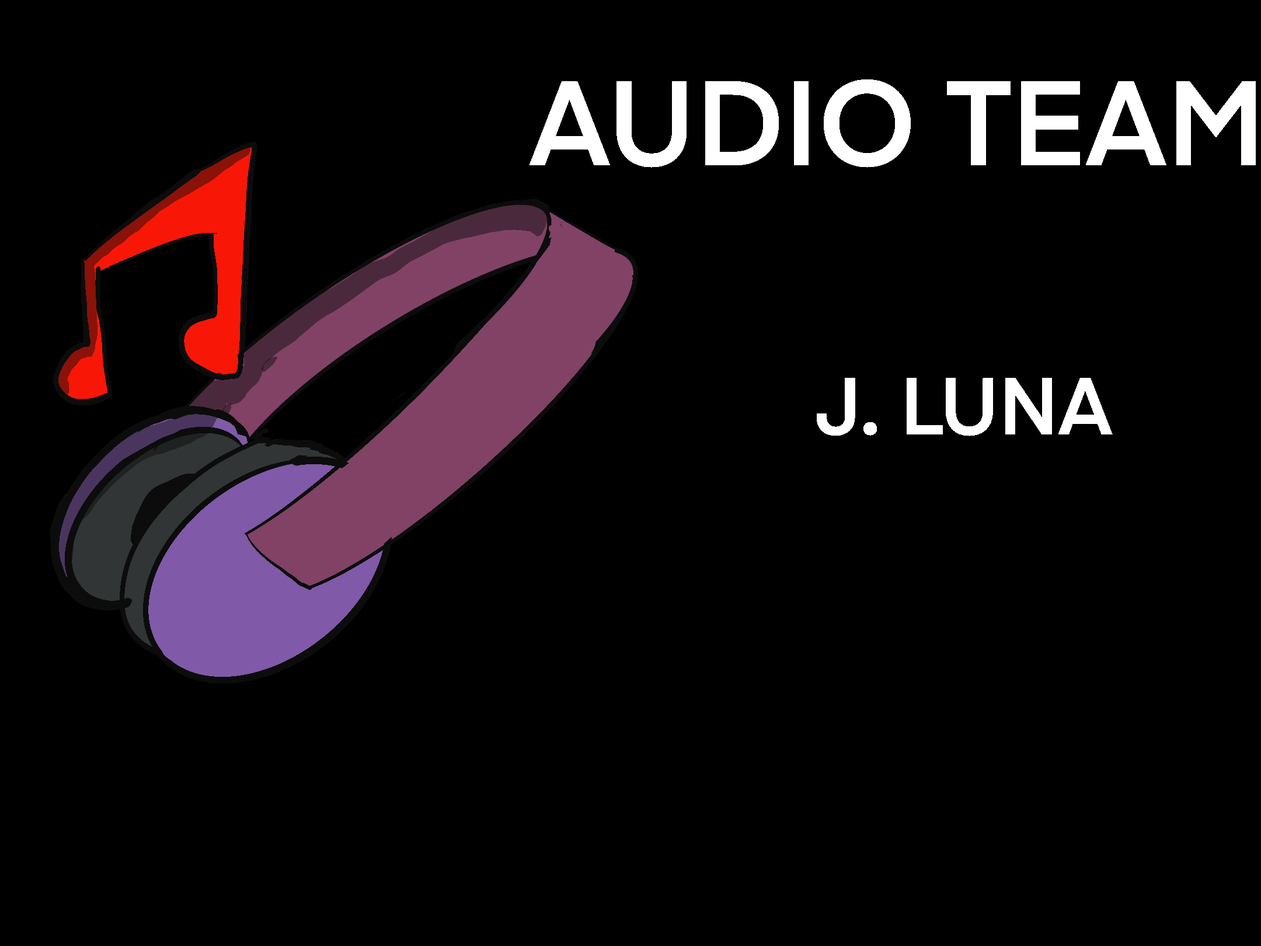
<style>
.page{position:relative;width:1261px;height:946px;background:#000000}
.page>*{position:absolute;margin:0}
.t1{font:118.1px "Eina01-SemiBold";color:#ffffff}
.t2{font:79.1px "Eina01-SemiBold";color:#ffffff}
</style>
<div class="page">
<p class="t1" style="left:0px;top:0px;width:1261px;height:946px;text-align:center">AUDIO TEAM</p>
<p class="t2" style="left:0px;top:0px;width:1261px;height:946px;text-align:center">J. LUNA</p>
</div>
